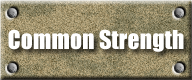
<style>
.page{position:relative;width:192px;height:80px}
.page>*{position:absolute;margin:0}
.t1{font:24px "Impact";color:#ffffff}
</style>
<div class="page">
<p class="t1" style="left:8px;top:29px;width:176px;height:23px">Common Strength</p>
</div>
